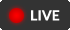
<style>
.page{position:relative;width:70px;height:30px;background:#333333}
.page>*{position:absolute;margin:0}
.t1{font:14px "Lato-Bold";color:#ffffff}
</style>
<div class="page">
<p class="t1" style="left:31px;top:10px;width:29px;height:11px">LIVE</p>
</div>
